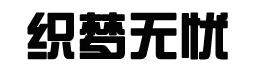
<style>
.page{position:relative;width:260px;height:69px;background:#ffffff}
.page>*{position:absolute;margin:0}
.t1{font:50px "ç»å¸ç»¼èºä½ç®-regular";color:#040404;font-weight:bold}
</style>
<div class="page">
<p class="t1" style="left:27px;top:12px;width:201px;height:48px">织梦无忧</p>
</div>
